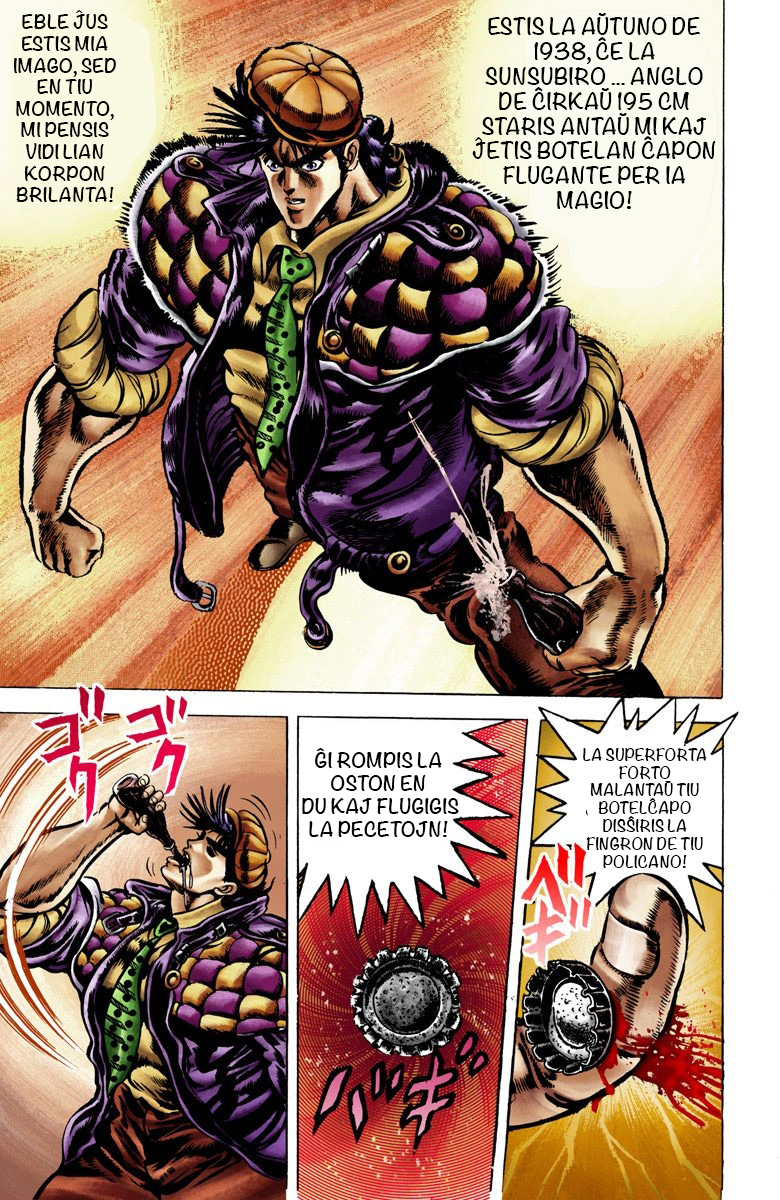
<style>
.page{position:relative;width:780px;height:1200px}
.page>*{position:absolute;margin:0}
.t1{font:18px "Noteworthy-Bold";color:#000000}
.t2{font:20.7px "Noteworthy-Bold";color:#000000}
.t3{font:19px "Noteworthy-Bold";color:#000000}
.t4{font:14.8px "Noteworthy-Bold";color:#000000}
</style>
<div class="page">
<p class="t1" style="left:13px;top:10px;width:103px;height:192px;text-align:center">EBLE ĴUS ESTIS MIA IMAGO, SED EN TIU MOMENTO, MI PENSIS VIDI LIAN KORPON BRILANTA!</p>
<p class="t2" style="left:472px;top:13px;width:244px;height:196px;text-align:center">ESTIS LA AŬTUNO DE 1938, ĈE LA SUNSUBIRO ... ANGLO DE ĈIRKAŬ 195 CM STARIS ANTAŬ MI KAJ ĴETIS BOTELAN ĈAPON FLUGANTE PER IA MAGIO!</p>
<p class="t3" style="left:302px;top:748px;width:157px;height:89px;text-align:center">ĜI ROMPIS LA OSTON EN<br> DU KAJ FLUGIGIS LA PECETOJN!</p>
<p class="t4" style="left:583px;top:748px;width:124px;height:120px;text-align:center">LA SUPERFORTA FORTO MALANTAŬ TIU BOTELĈAPO DISŜIRIS LA FINGRON DE TIU POLICANO!</p>
</div>
